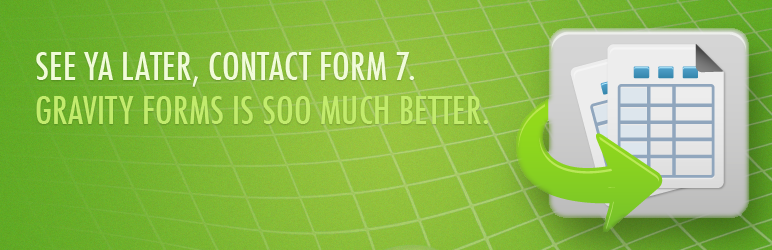
<style>
.page{position:relative;width:772px;height:250px}
.page>*{position:absolute;margin:0}
.t1{font:36.7px "Futura-CondensedMedium";letter-spacing:0.01em;color:#c2eb6c;text-transform:uppercase}
.t2{font:36.7px "Futura-CondensedMedium";letter-spacing:0.01em;color:#f0fbd8;text-transform:uppercase}
</style>
<div class="page">
<p class="t1" style="left:36px;top:52px;width:453px;height:72px"><span class="t2">See ya later, Contact Form 7.<br></span>Gravity Forms is soo much better.</p>
</div>
